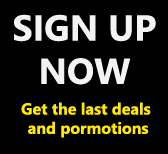
<style>
.page{position:relative;width:168px;height:154px;background:#000000}
.page>*{position:absolute;margin:0}
.t1{font:36px "SegoeUI-Bold";color:#f3f3f3}
.t2{font:16px "SegoeUI-Bold";color:#ffea00}
</style>
<div class="page">
<p class="t1" style="left:14px;top:14px;width:142px;height:71px;text-align:center">SIGN UP<br>NOW</p>
<p class="t2" style="left:21px;top:102px;width:130px;height:36px;text-align:center">Get the last deals<br> and pormotions</p>
</div>
